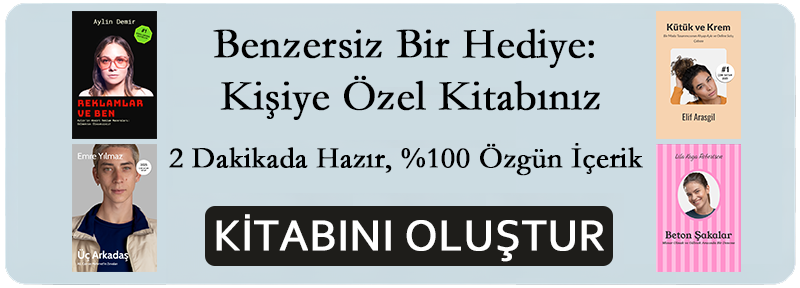
<style>
.page{position:relative;width:800px;height:288px;background:#ccdce3}
.page>*{position:absolute;margin:0}
.t1{font:43px "Garamond";color:#000000;font-weight:bold}
.t2{font:30px "Garamond";color:#000000;font-weight:bold}
.t3{font:45px "Corbel";color:#ffffff;font-weight:bold}
</style>
<div class="page">
<p class="t1" style="left:213px;top:28px;width:387px;height:92px;text-align:center">Benzersiz Bir Hediye: <br>Kişiye Özel Kitabınız</p>
<p class="t2" style="left:169px;top:143px;width:474px;height:33px">2 Dakikada Hazır, %100 Özgün İçerik</p>
<p class="t3" style="left:216px;top:214px;width:388px;height:48px">KİTABINI OLUŞTUR</p>
</div>
